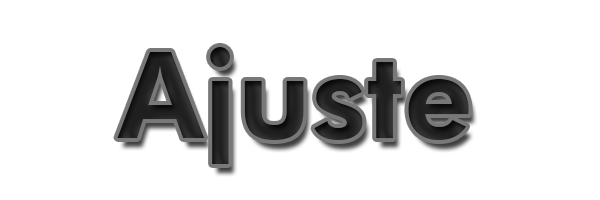
<style>
.page{position:relative;width:600px;height:200px;background:#ffffff}
.page>*{position:absolute;margin:0}
.t1{font:120px "FuturaBT-Heavy";color:#212121}
</style>
<div class="page">
<p class="t1" style="left:117px;top:47px;width:352px;height:117px">Ajuste</p>
</div>
